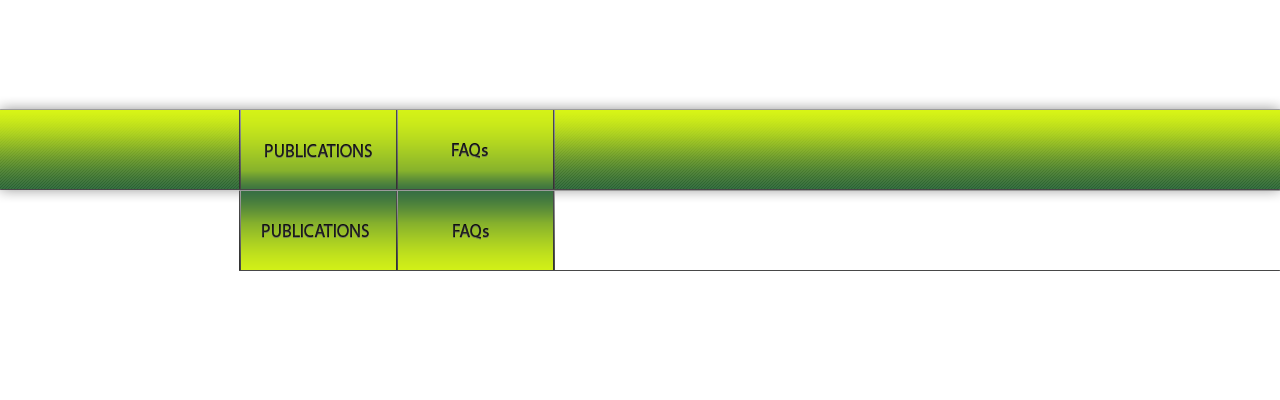
<style>
.page{position:relative;width:1280px;height:400px;background:#ffffff}
.page>*{position:absolute;margin:0}
.t1{font:18px "MyriadPro-Regular";color:#1b1a1a}
</style>
<div class="page">
<p class="t1" style="left:265px;top:144px;width:107px;height:13px">PUBLICATIONS</p>
<p class="t1" style="left:452px;top:143px;width:36px;height:15px">FAQs</p>
<p class="t1" style="left:262px;top:224px;width:107px;height:13px">PUBLICATIONS</p>
<p class="t1" style="left:453px;top:224px;width:36px;height:15px">FAQs</p>
</div>
